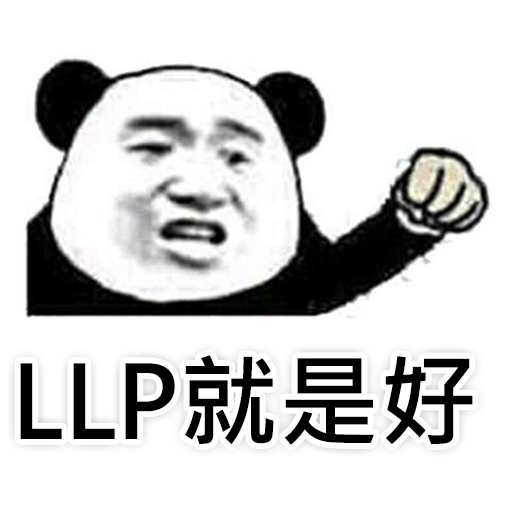
<style>
.page{position:relative;width:512px;height:512px;background:#ffffff}
.page>*{position:absolute;margin:0}
.t1{font:100px "MicrosoftJhengHeiBold";color:#000000}
</style>
<div class="page">
<p class="t1" style="left:20px;top:355px;width:453px;height:90px">LLP就是好</p>
</div>
